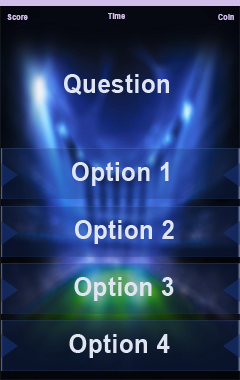
<style>
.page{position:relative;width:240px;height:380px}
.page>*{position:absolute;margin:0}
.t1{font:7.9px "Arial-BoldMT";letter-spacing:0.02em;color:#d2beeb;scale:0.91 1}
.t2{font:26.4px "Arial-BoldMT";letter-spacing:0.02em;color:#dfe6f2;scale:0.91 1}
</style>
<div class="page">
<p class="t1" style="left:7px;top:14px;width:21px;height:6px">Score</p>
<p class="t1" style="left:108px;top:13px;width:17px;height:6px">Time</p>
<p class="t1" style="left:218px;top:14px;width:16px;height:6px">Coin</p>
<p class="t2" style="left:64px;top:74px;width:105px;height:21px">Question</p>
<p class="t2" style="left:72px;top:162px;width:97px;height:24px">Option 1</p>
<p class="t2" style="left:75px;top:220px;width:99px;height:24px">Option 2</p>
<p class="t2" style="left:74px;top:277px;width:100px;height:24px">Option 3</p>
<p class="t2" style="left:69px;top:334px;width:101px;height:24px">Option 4</p>
</div>
